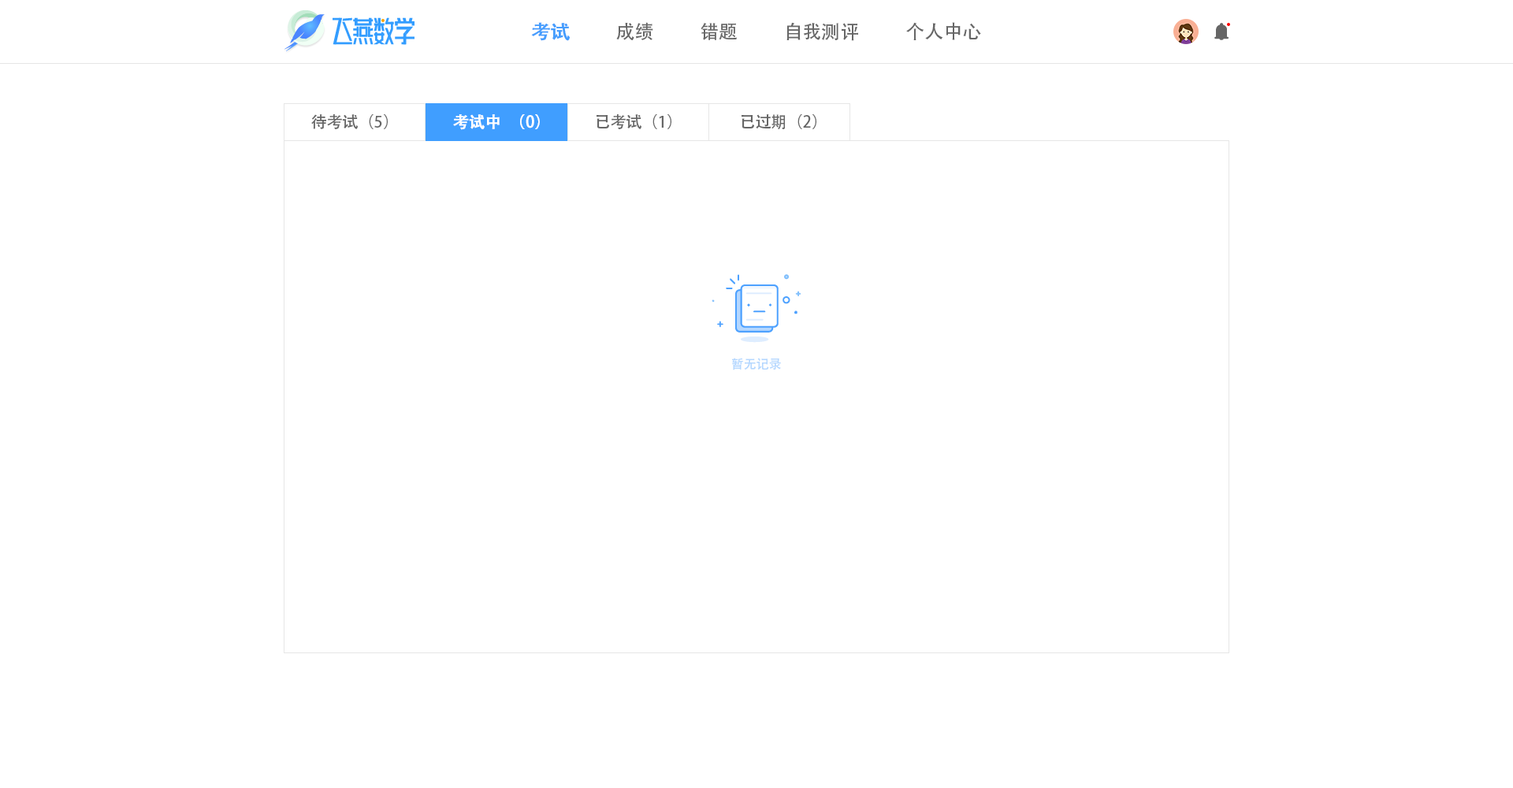
<style>
.page{position:relative;width:1513px;height:788px;background:#ffffff}
.page>*{position:absolute;margin:0}
.t1{font:18.9px "AdobeHeitiStd-Regular";color:#459dfd;font-weight:bold}
.t2{font:18.9px "AdobeHeitiStd-Regular";color:#666666}
.t3{font:15.8px "AdobeHeitiStd-Regular";color:#666666}
.t4{font:15.8px "AdobeHeitiStd-Regular";color:#ffffff;font-weight:bold}
.t5{font:12.6px "AdobeHeitiStd-Regular";color:#b4d7ff}
</style>
<div class="page">
<p class="t1" style="left:531px;top:22px;width:39px;height:19px">考试</p>
<p class="t2" style="left:616px;top:22px;width:37px;height:18px">成绩</p>
<p class="t2" style="left:701px;top:23px;width:36px;height:17px">错题</p>
<p class="t2" style="left:786px;top:22px;width:72px;height:19px">自我测评</p>
<p class="t2" style="left:906px;top:22px;width:75px;height:18px">个人中心</p>
<p class="t3" style="left:311px;top:114px;width:77px;height:15px">待考试（5）</p>
<p class="t4" style="left:453px;top:114px;width:87px;height:16px">考试中（0）</p>
<p class="t3" style="left:597px;top:114px;width:74px;height:15px">已考试（1）</p>
<p class="t3" style="left:742px;top:114px;width:74px;height:15px">已过期（2）</p>
<p class="t5" style="left:732px;top:358px;width:49px;height:12px">暂无记录</p>
</div>
